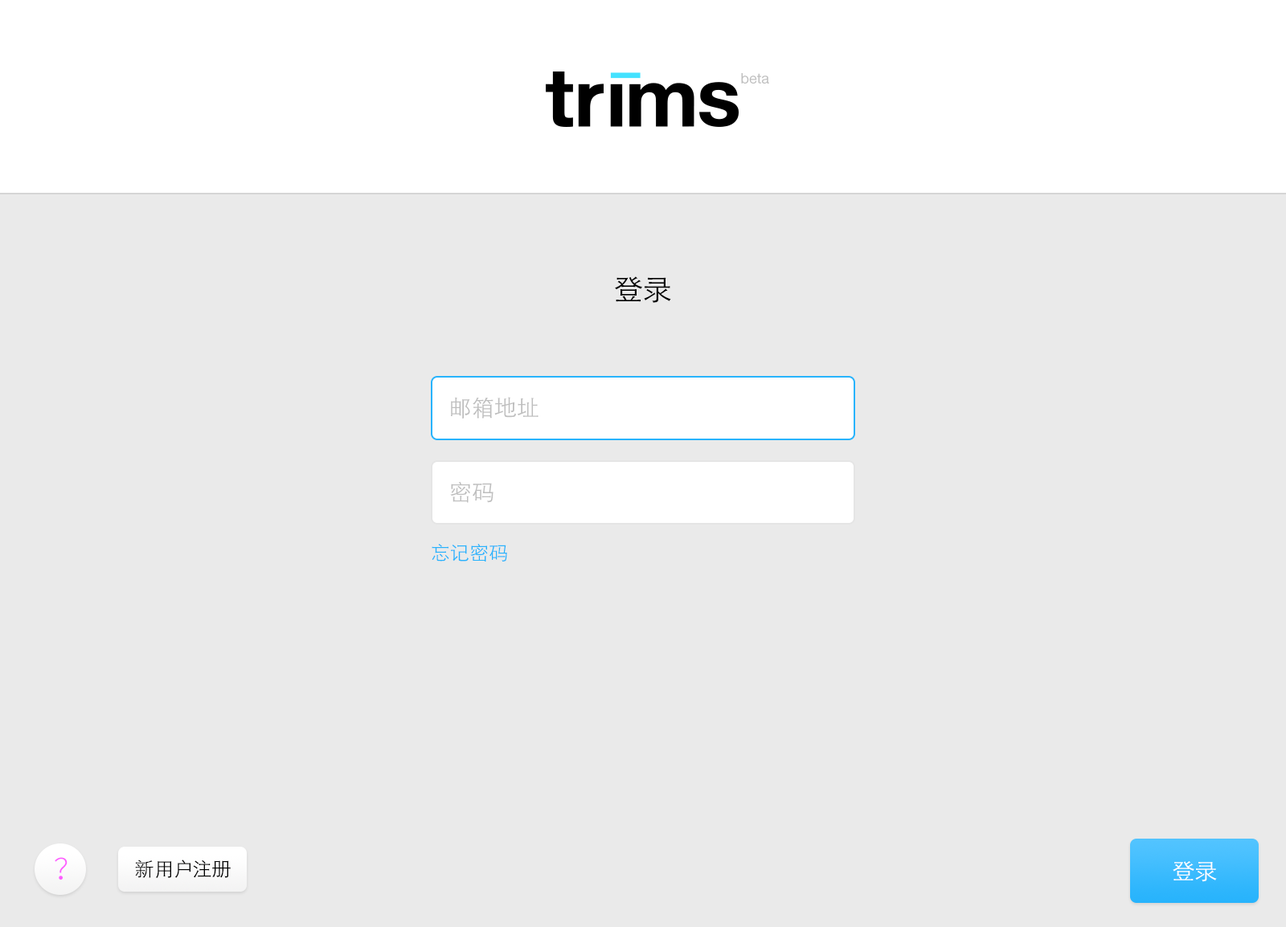
<style>
.page{position:relative;width:1286px;height:927px;background:#eaeaea}
.page>*{position:absolute;margin:0}
.t1{font:14.5px "HelveticaNeue";color:#bebebe}
.t2{font:28.9px "STHeitiSC-Light";color:#000000}
.t3{font:22.5px "STHeitiSC-Light";color:#bebebe}
.t4{font:19.3px "STHeitiSC-Light";color:#27b3fc}
.t5{font:28.9px "SourceHanSansCN-Light";color:#fd5eff}
.t6{font:19.3px "STHeitiSC-Light";color:#000000}
.t7{font:22.5px "STHeitiSC-Light";color:#ffffff}
</style>
<div class="page">
<p class="t1" style="left:741px;top:73px;width:28px;height:11px">beta</p>
<p class="t2" style="left:615px;top:276px;width:56px;height:27px">登录</p>
<p class="t3" style="left:451px;top:397px;width:87px;height:22px">邮箱地址</p>
<p class="t3" style="left:450px;top:481px;width:43px;height:22px">密码</p>
<p class="t4" style="left:432px;top:544px;width:75px;height:18px">忘记密码</p>
<p class="t5" style="left:55px;top:857px;width:13px;height:23px">？</p>
<p class="t6" style="left:135px;top:860px;width:96px;height:18px">新用户注册</p>
<p class="t7" style="left:1172px;top:861px;width:45px;height:21px">登录</p>
</div>
